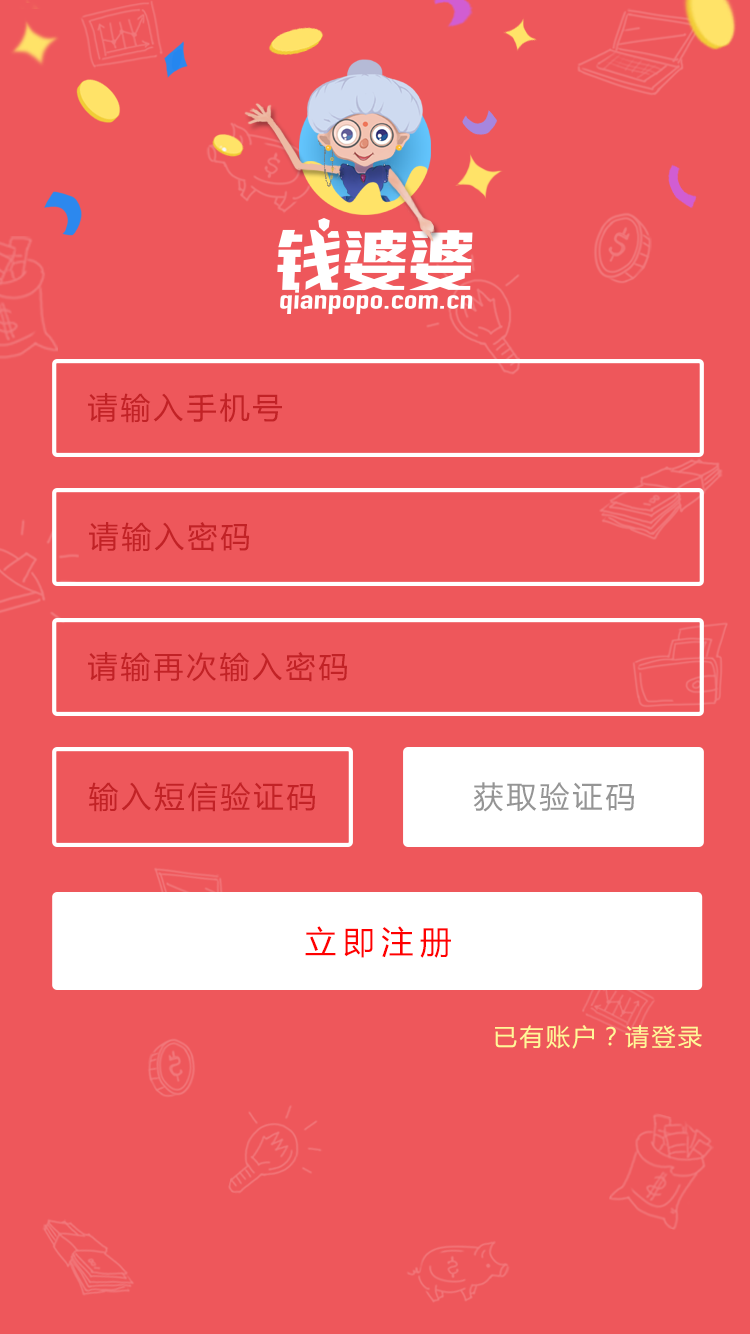
<style>
.page{position:relative;width:750px;height:1334px;background:#ee575b}
.page>*{position:absolute;margin:0}
.t1{font:30px "MicrosoftYaHei";letter-spacing:0.1em;color:#c22226}
.t2{font:30px "MicrosoftYaHei";letter-spacing:0.1em;color:#959595}
.t3{font:32px "MicrosoftYaHei";letter-spacing:0.2em;color:#ff0000}
.t4{font:24px "MicrosoftYaHei";letter-spacing:0.1em;color:#fff799}
</style>
<div class="page">
<p class="t1" style="left:88px;top:393px;width:194px;height:30px">请输入手机号</p>
<p class="t1" style="left:89px;top:522px;width:160px;height:30px">请输入密码</p>
<p class="t1" style="left:88px;top:652px;width:259px;height:30px">请输再次输入密码</p>
<p class="t1" style="left:89px;top:782px;width:226px;height:30px">输入短信验证码</p>
<p class="t2" style="left:473px;top:782px;width:161px;height:30px">获取验证码</p>
<p class="t3" style="left:305px;top:926px;width:146px;height:32px">立即注册</p>
<p class="t4" style="left:495px;top:1025px;width:207px;height:24px">已有账户？请登录</p>
</div>
